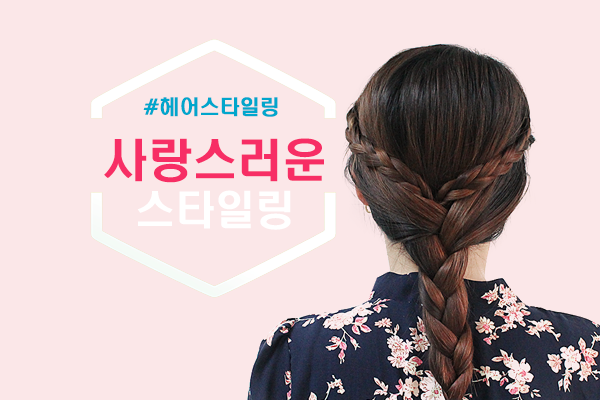
<style>
.page{position:relative;width:600px;height:400px;background:#fbe7e8}
.page>*{position:absolute;margin:0}
.t1{font:20px "H2hdrM";color:#01a6cc}
.t2{font:45px "H2hdrM";color:#f72e65}
.t3{font:40px "H2hdrM";color:#ffffff}
</style>
<div class="page">
<p class="t1" style="left:143px;top:97px;width:135px;height:20px">#헤어스타일링</p>
<p class="t2" style="left:104px;top:138px;width:220px;height:92px;text-align:center">사랑스러운<br><span class="t3">스타일링</span></p>
</div>
